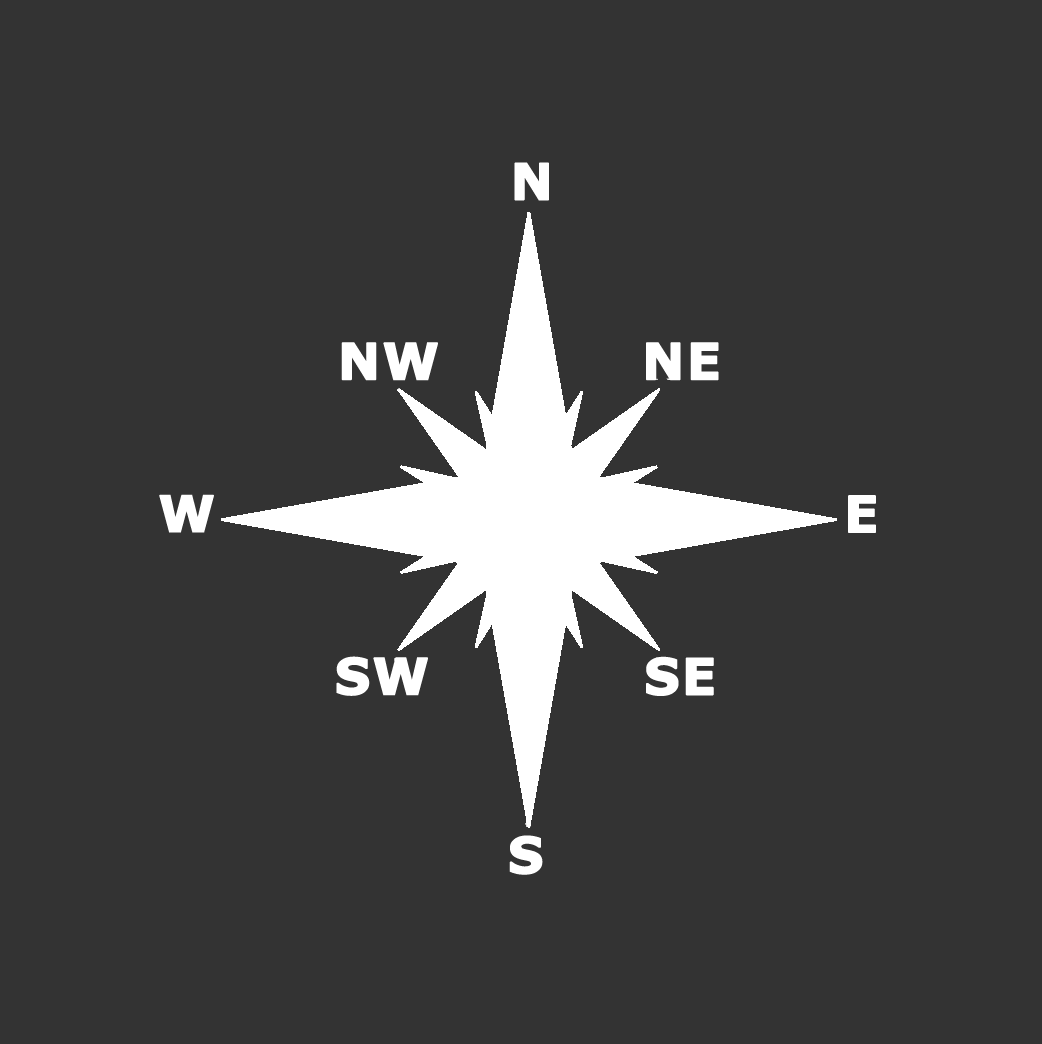
<style>
.page{position:relative;width:1042px;height:1044px;background:#333333}
.page>*{position:absolute;margin:0}
.t1{font:50px "Verdana-Bold";letter-spacing:0.02em;color:#ffffff;font-variant:small-caps;font-weight:bold}
</style>
<div class="page">
<p class="t1" style="left:514px;top:162px;width:35px;height:39px">N</p>
<p class="t1" style="left:341px;top:342px;width:97px;height:39px">NW</p>
<p class="t1" style="left:646px;top:342px;width:73px;height:39px">NE</p>
<p class="t1" style="left:159px;top:494px;width:55px;height:39px">W</p>
<p class="t1" style="left:848px;top:495px;width:28px;height:38px">E</p>
<p class="t1" style="left:336px;top:656px;width:92px;height:40px">SW</p>
<p class="t1" style="left:646px;top:656px;width:68px;height:40px">SE</p>
<p class="t1" style="left:509px;top:835px;width:34px;height:40px">S</p>
</div>
